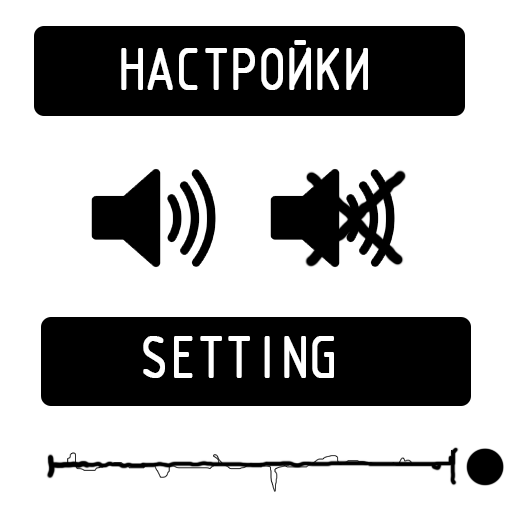
<style>
.page{position:relative;width:512px;height:512px;background:#ffffff}
.page>*{position:absolute;margin:0}
.t1{font:64.2px "ISOCTEUR";letter-spacing:-0.2em;color:#ffffff;text-transform:uppercase;font-weight:bold;scale:0.82 1}
</style>
<div class="page">
<p class="t1" style="left:121px;top:40px;width:247px;height:50px">Настройки</p>
<p class="t1" style="left:143px;top:336px;width:191px;height:42px">setting</p>
</div>
